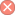
<style>
.page{position:relative;width:15px;height:15px;background:#f98778}
.page>*{position:absolute;margin:0}
.t1{font:16.4px "MS-PGothic";color:#ffffff}
</style>
<div class="page">
<p class="t1" style="left:3px;top:3px;width:9px;height:9px">×</p>
</div>
